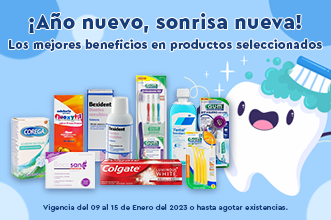
<style>
.page{position:relative;width:331px;height:220px;background:#a2d3fe}
.page>*{position:absolute;margin:0}
.t1{font:20.7px "CeraPro-Black";letter-spacing:0.02em;color:#153e7c}
.t2{font:12.3px "CeraPro-Black";letter-spacing:0.02em;color:#153e7c}
.t3{font:7.6px "CeraPro-Medium";letter-spacing:0.02em;color:#153e7c}
</style>
<div class="page">
<p class="t1" style="left:29px;top:13px;width:272px;height:20px">¡Año nuevo, sonrisa nueva!</p>
<p class="t2" style="left:9px;top:39px;width:313px;height:12px">Los mejores beneficios en productos seleccionados</p>
<p class="t3" style="left:43px;top:204px;width:245px;height:8px">Vigencia del 09 al 15 de Enero del 2023 o hasta agotar existencias.</p>
</div>
